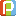
<style>
.page{position:relative;width:16px;height:16px;background:#ffffff}
.page>*{position:absolute;margin:0}
.t1{font:19.4px "Audiowide-Regular";letter-spacing:-0.05em;color:#ffffff;scale:0.93 1}
</style>
<div class="page">
<p class="t1" style="left:3px;top:1px;width:11px;height:13px">p</p>
</div>
